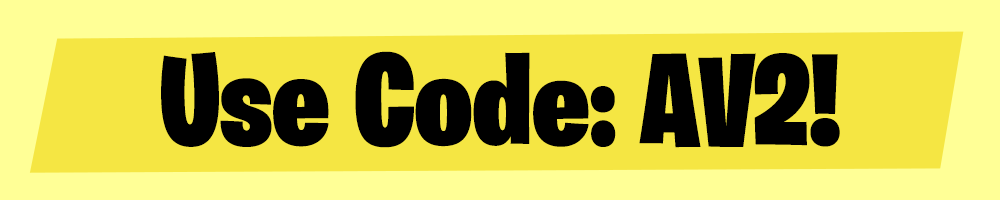
<style>
.page{position:relative;width:1000px;height:200px;background:#f5e643}
.page>*{position:absolute;margin:0}
.t1{font:130px "BurbankBigCondensed-Black";color:#000000}
</style>
<div class="page">
<p class="t1" style="left:161px;top:51px;width:679px;height:97px">Use Code: AV2!</p>
</div>
